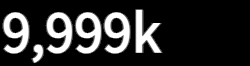
<style>
.page{position:relative;width:250px;height:66px;background:#000000}
.page>*{position:absolute;margin:0}
.t1{font:52px "WebPSD-18463539-0-Regular";color:#ffffff;font-weight:bold}
</style>
<div class="page">
<p class="t1" style="left:0px;top:0px;width:250px;height:66px">9,999k</p>
</div>
